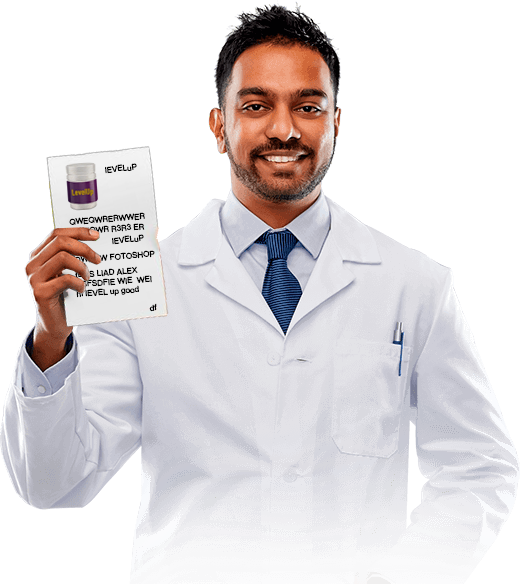
<style>
.page{position:relative;width:520px;height:584px;background:#ffffff}
.page>*{position:absolute;margin:0}
.t1{font:8px "MS Sans Serif";color:#000000}
.t2{font:8px "MS Sans Serif"}
</style>
<div class="page">
<p class="t1" style="left:105px;top:163px;width:32px;height:11px;rotate:-5deg">lEVELuP</p>
<p class="t1" style="left:69px;top:212px;width:76px;height:13px;rotate:-4deg">QWEQWRERWWER</p>
<p class="t2" style="left:70px;top:223px;width:75px;height:12px;rotate:-4deg">QWEQWR R3R3 ER</p>
<p class="t1" style="left:112px;top:234px;width:32px;height:11px;rotate:-5deg">lEVELuP</p>
<p class="t1" style="left:74px;top:250px;width:81px;height:13px;rotate:-4deg">QWEQW FOTOSHOP</p>
<p class="t1" style="left:75px;top:266px;width:82px;height:46px;text-align:right;rotate:-4deg">tEMS LIAD ALEX<br>DSFSDFIE WIE  WEI<br>hI lEVEL up good <br><br>  df</p>
</div>
